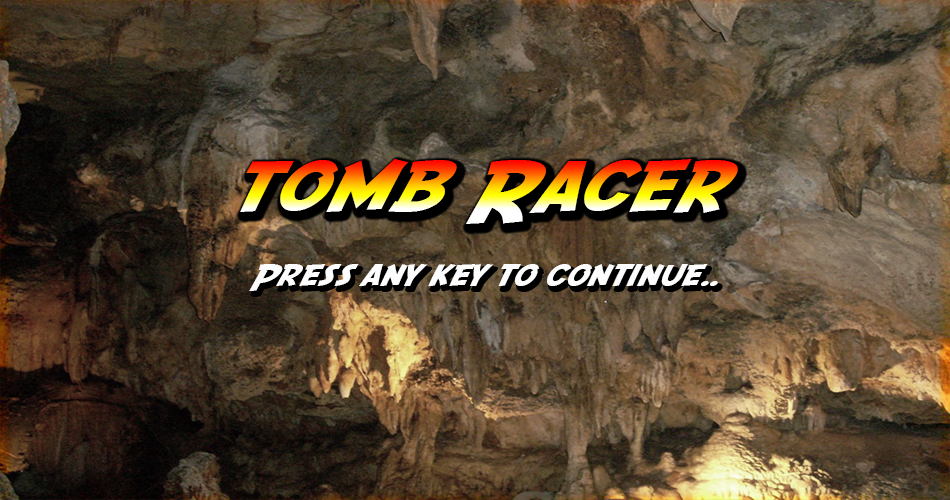
<style>
.page{position:relative;width:950px;height:500px}
.page>*{position:absolute;margin:0}
.t1{font:72px "SFFedora";letter-spacing:-0.005em;scale:1.2 1}
.t2{font:30px "SFFedora";letter-spacing:-0.005em;color:#fdfdfd;scale:1.2 1}
</style>
<div class="page">
<p class="t1" style="left:240px;top:159px;width:498px;height:65px">tomb Racer</p>
<p class="t2" style="left:249px;top:264px;width:469px;height:27px">Press any key to continue..</p>
</div>
